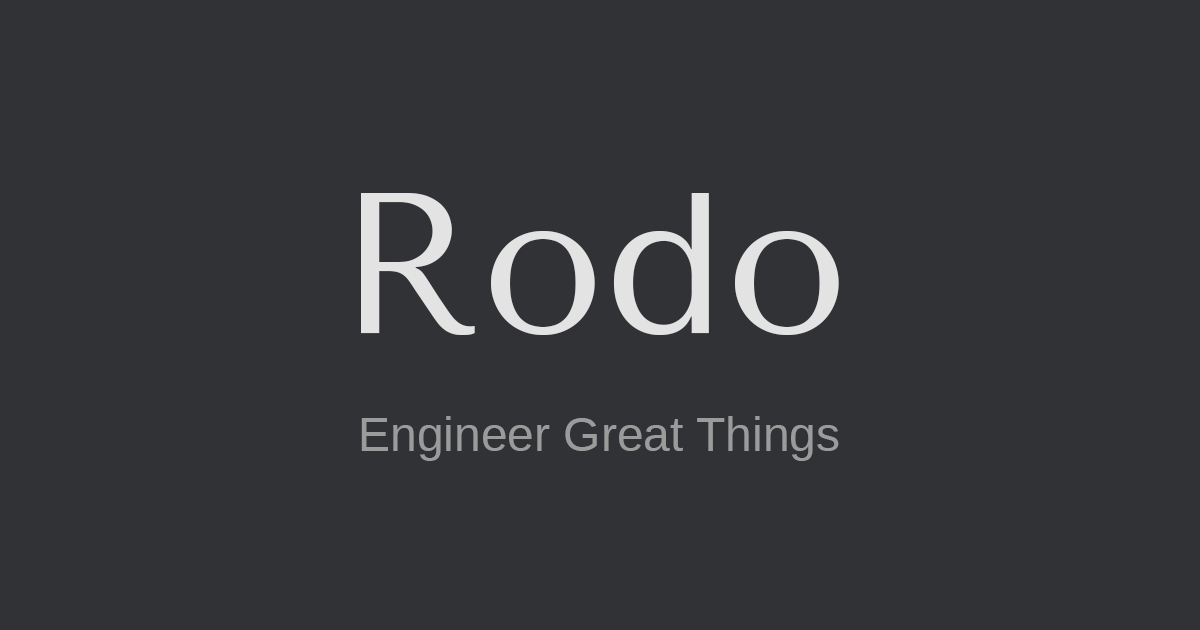
<style>
.page{position:relative;width:1200px;height:630px;background:#303235}
.page>*{position:absolute;margin:0}
.t1{font:200px "TenorSans";color:#e3e3e3}
.t2{font:48px "LiberationSans";color:#9b9b9b}
</style>
<div class="page">
<p class="t1" style="left:361px;top:193px;width:478px;height:142px">Rodo</p>
<p class="t2" style="left:361px;top:416px;width:478px;height:45px">Engineer Great Things</p>
</div>
